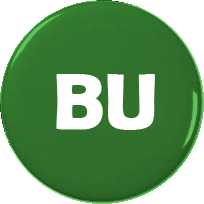
<style>
.page{position:relative;width:204px;height:204px;background:#ffffff}
.page>*{position:absolute;margin:0}
.t1{font:80px "BerlinSansFBDemi-Bold";color:#ffffff}
</style>
<div class="page">
<p class="t1" style="left:56px;top:74px;width:99px;height:56px">BU</p>
</div>
